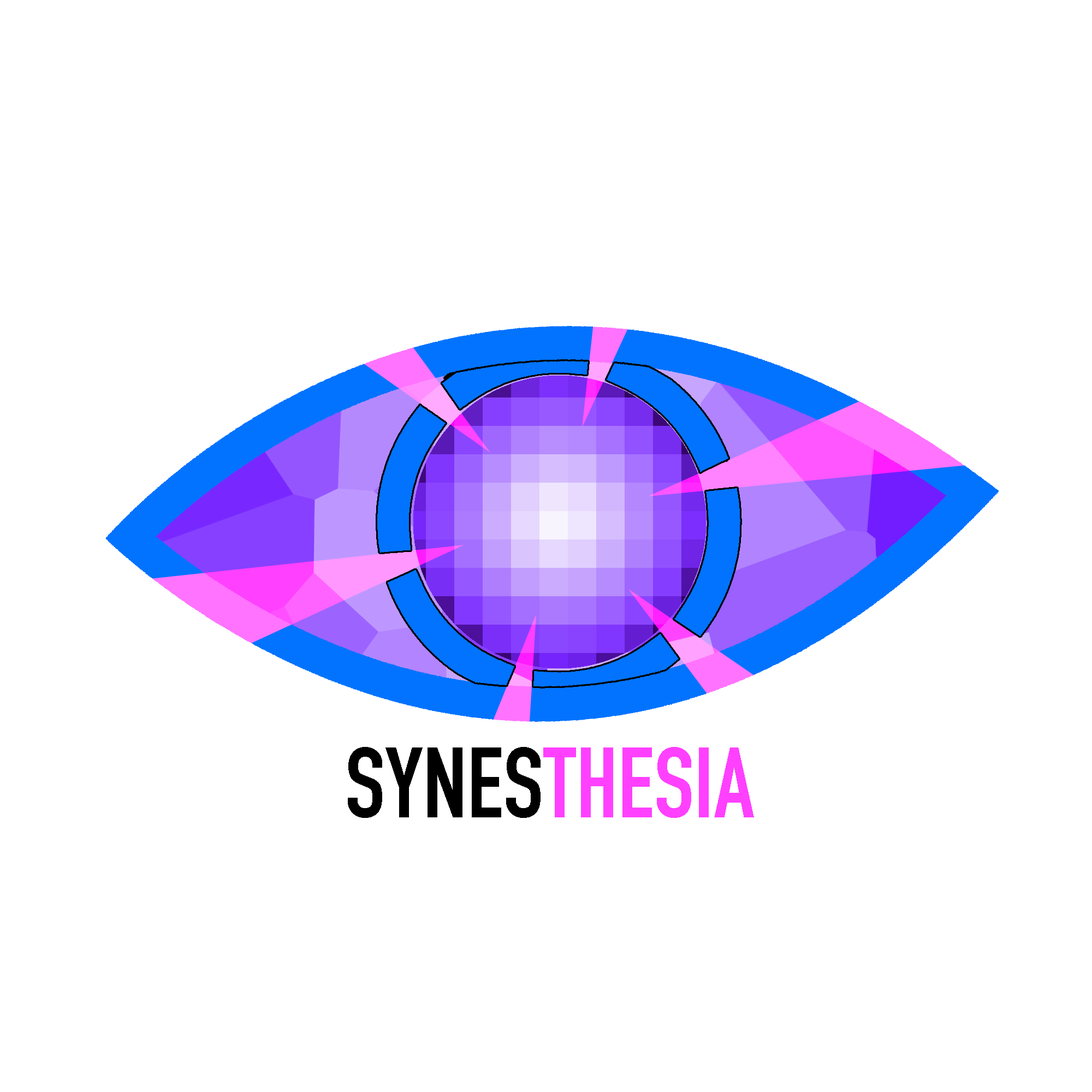
<style>
.page{position:relative;width:1092px;height:1092px;background:#ffffff}
.page>*{position:absolute;margin:0}
.t1{font:98.3px "DINCondensed-Bold";color:#ff40ff}
.t2{font:98.3px "DINCondensed-Bold";color:#000000}
</style>
<div class="page">
<p class="t1" style="left:348px;top:747px;width:406px;height:71px"><span class="t2">SYNES</span>THESIA</p>
</div>
